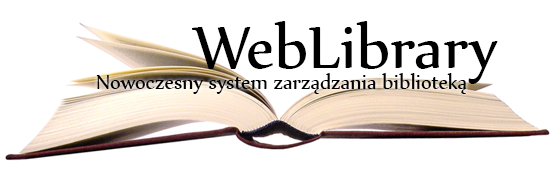
<style>
.page{position:relative;width:559px;height:183px;background:#ffffff}
.page>*{position:absolute;margin:0}
.t1{font:72px "Nyala-Regular";color:#000000}
.t2{font:24px "Nyala-Regular";color:#000000}
</style>
<div class="page">
<p class="t1" style="left:192px;top:21px;width:306px;height:63px">WebLibrary</p>
<p class="t2" style="left:96px;top:73px;width:370px;height:21px">Nowoczesny system zarządzania biblioteką</p>
</div>
